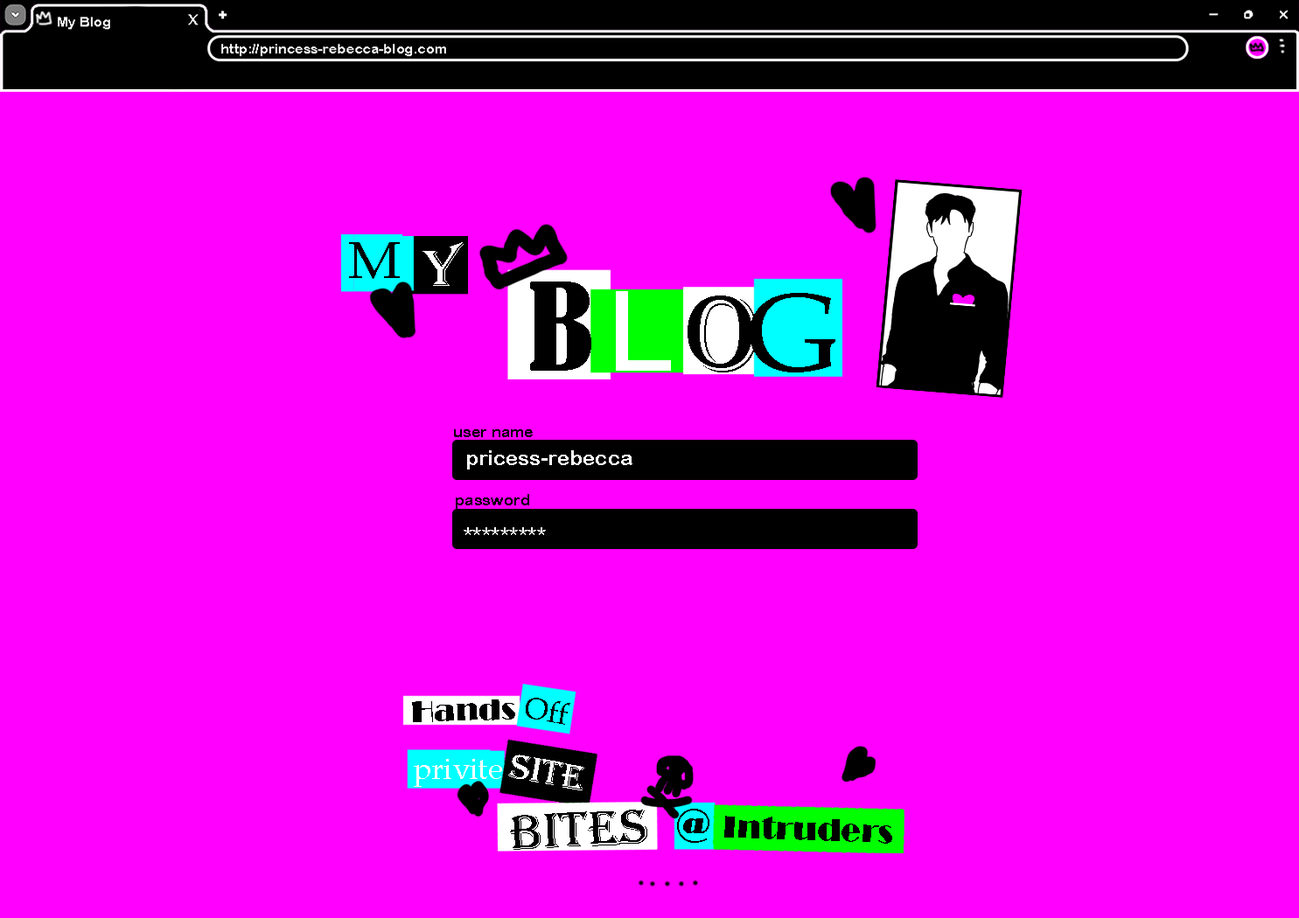
<style>
.page{position:relative;width:1299px;height:918px;background:#ff00ff}
.page>*{position:absolute;margin:0}
.t1{font:52.5px "BookAntiqua";color:#000000;scale:1.07 1}
.t2{font:52.5px "Algerian";color:#ffffff;scale:1.07 1}
.t3{font:112.6px "BernardMT-Condensed";color:#000000;scale:1.07 1}
.t4{font:112.6px "Bahnschrift";color:#ffffff;scale:1.07 1}
.t5{font:112.6px "BookAntiqua";color:#000000;scale:1.07 1}
.t6{font:112.6px "Algerian";color:#000000;scale:1.07 1}
.t7{font:15.7px "ArialRoundedMTBold";color:#000000}
.t8{font:21px "ArialRoundedMTBold";color:#ffffff}
.t9{font:30.5px "Broadway";color:#000000}
.t10{font:30.5px "BookAntiqua";color:#000000}
.t11{font:30.5px "BookAntiqua";color:#ffffff}
.t12{font:36.6px "Algerian";color:#ffffff}
.t13{font:50.8px "Algerian";color:#000000}
.t14{font:48.8px "Broadway";color:#000000}
.t15{font:32.6px "Broadway";color:#000000}
</style>
<div class="page">
<p class="t1" style="left:349px;top:242px;width:51px;height:37px">M</p>
<p class="t2" style="left:422px;top:242px;width:41px;height:44px">Y</p>
<p class="t3" style="left:530px;top:282px;width:61px;height:89px">B</p>
<p class="t4" style="left:616px;top:291px;width:55px;height:80px">L</p>
<p class="t5" style="left:749px;top:293px;width:86px;height:80px">G</p>
<p class="t6" style="left:687px;top:296px;width:70px;height:77px">O</p>
<p class="t7" style="left:454px;top:429px;width:79px;height:8px">user name</p>
<p class="t8" style="left:467px;top:450px;width:165px;height:20px">pricess-rebecca</p>
<p class="t7" style="left:456px;top:494px;width:73px;height:15px">password</p>
<p class="t8" style="left:463px;top:527px;width:83px;height:8px">*********</p>
<p class="t9" style="left:412px;top:700px;width:103px;height:22px;rotate:-2deg">Hands</p>
<p class="t10" style="left:526px;top:698px;width:44px;height:27px;rotate:10deg">Off</p>
<p class="t11" style="left:414px;top:759px;width:88px;height:28px">privite</p>
<p class="t12" style="left:508px;top:755px;width:76px;height:36px;rotate:10deg">site</p>
<p class="t13" style="left:510px;top:810px;width:137px;height:40px;rotate:-3deg">Bites</p>
<p class="t14" style="left:677px;top:809px;width:32px;height:34px">@</p>
<p class="t15" style="left:724px;top:816px;width:168px;height:28px;rotate:2deg">Intruders</p>
</div>
